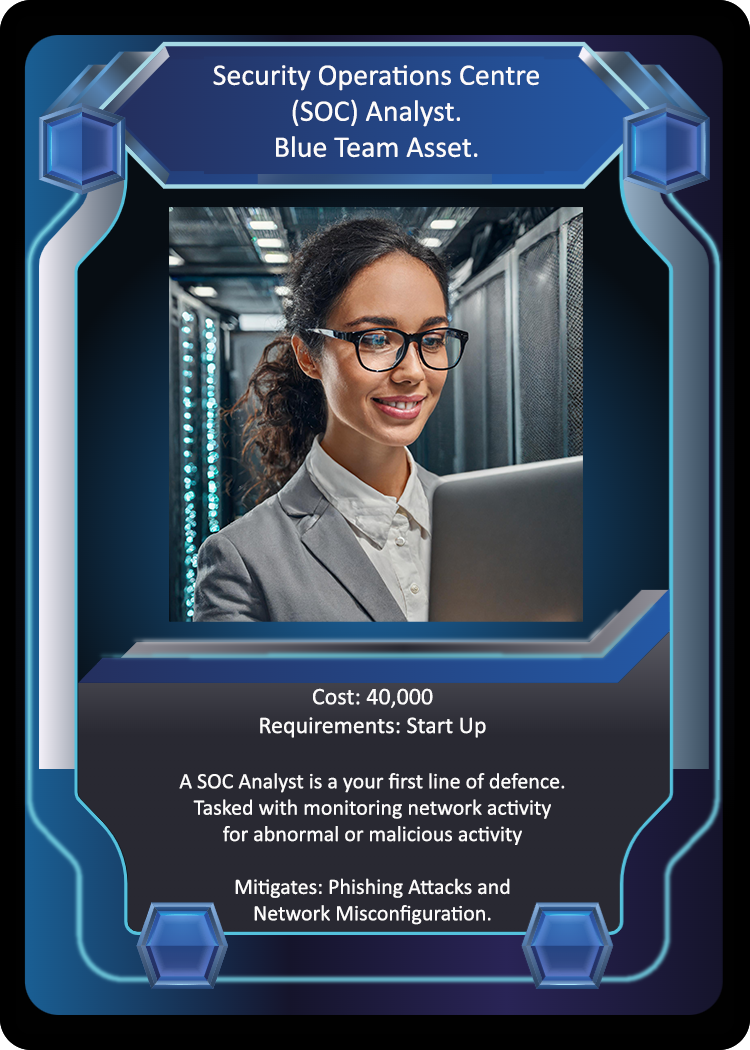
<style>
.page{position:relative;width:750px;height:1050px}
.page>*{position:absolute;margin:0}
.t1{font:30px "Calibri";color:#fcfbfb}
.t2{font:22px "Calibri";color:#fcfbfb}
.t3{font:24px "Calibri";color:#fcfbfb}
</style>
<div class="page">
<p class="t1" style="left:213px;top:65px;width:326px;height:93px;text-align:center">Security Operations Centre<br>(SOC) Analyst.<br>Blue Team Asset.</p>
<p class="t2" style="left:179px;top:688px;width:386px;height:237px;text-align:center"><span class="t3">Cost: 40,000<br>Requirements: Start Up<br><br></span>A SOC Analyst is a your first line of defence.<br>Tasked with monitoring network activity<br>for abnormal or malicious activity<br><br>Mitigates: Phishing Attacks and<br>Network Misconfiguration.</p>
</div>
